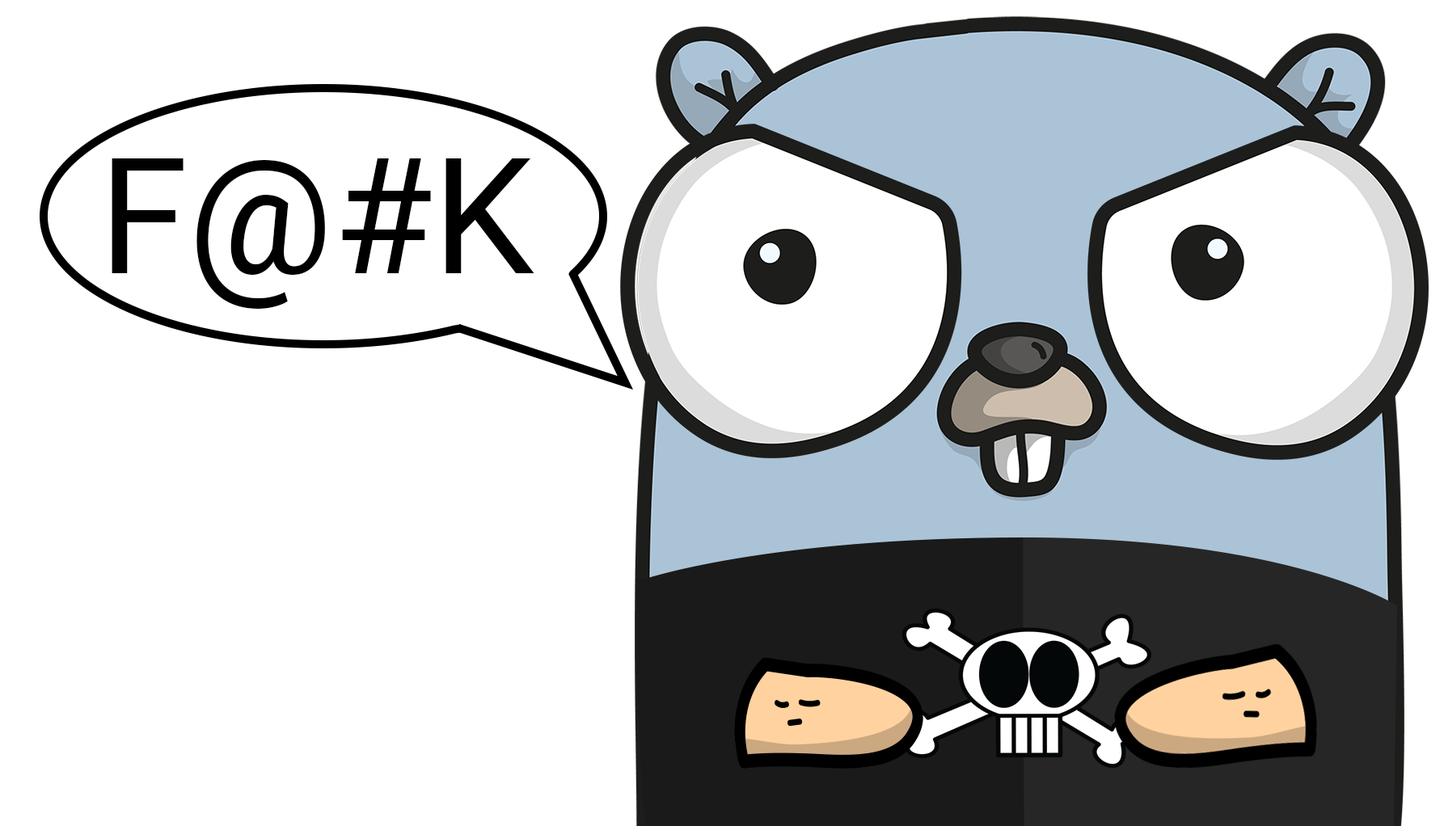
<style>
.page{position:relative;width:1444px;height:826px;background:#ffffff}
.page>*{position:absolute;margin:0}
.t1{font:161.7px "Roboto-Regular";color:#000000}
</style>
<div class="page">
<p class="t1" style="left:112px;top:158px;width:422px;height:151px">F@#K</p>
</div>
